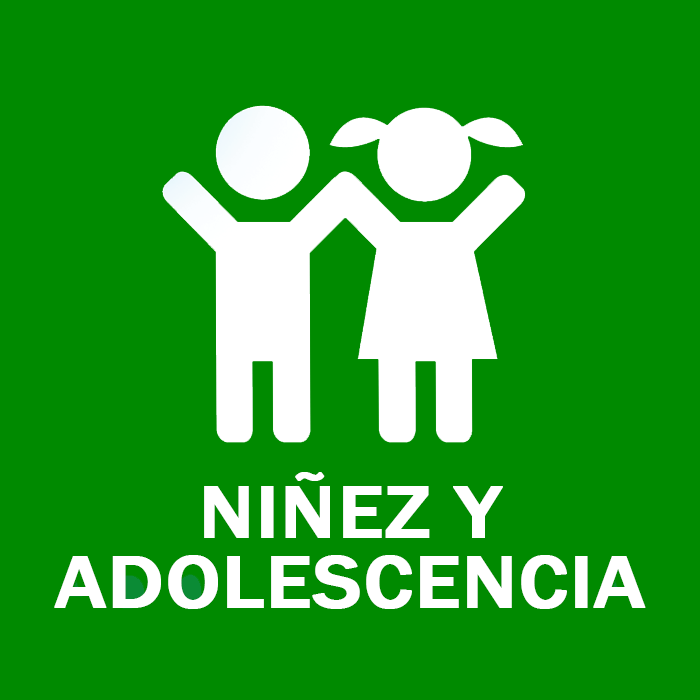
<style>
.page{position:relative;width:700px;height:700px;background:#008a00}
.page>*{position:absolute;margin:0}
.t1{font:77px/70px "FranklinGothic-Medium";color:#ffffff;font-weight:bold;scale:1.09 1}
</style>
<div class="page">
<p class="t1" style="left:54px;top:472px;width:592px;height:137px;text-align:center">NIÑEZ Y<br>ADOLESCENCIA</p>
</div>
